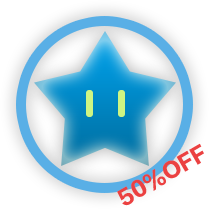
<style>
.page{position:relative;width:209px;height:209px;background:#ffffff}
.page>*{position:absolute;margin:0}
.t1{font:20px "FZLTTHK--GBK1-0";color:#eb4141}
</style>
<div class="page">
<p class="t1" style="left:117px;top:143px;width:87px;height:63px;rotate:-30deg">50%OFF</p>
</div>
